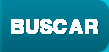
<style>
.page{position:relative;width:109px;height:52px}
.page>*{position:absolute;margin:0}
.t1{font:24px "PLZ-Regular";letter-spacing:-0.01em;color:#ffffff;font-weight:bold}
</style>
<div class="page">
<p class="t1" style="left:11px;top:19px;width:87px;height:15px">BUSCAR</p>
<p class="t1" style="left:12px;top:20px;width:87px;height:15px">BUSCAR</p>
</div>
